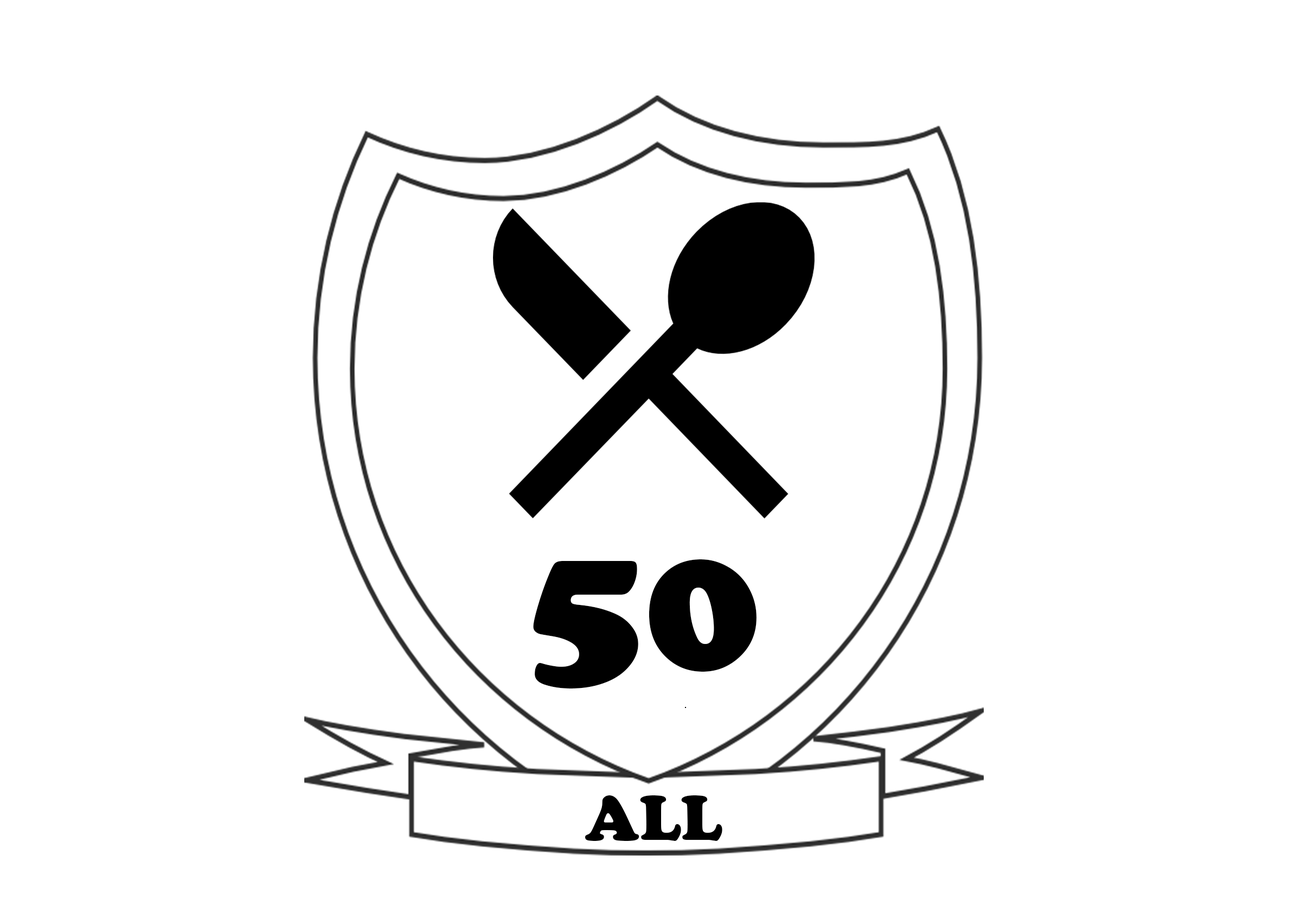
<style>
.page{position:relative;width:1307px;height:912px;background:#ffffff}
.page>*{position:absolute;margin:0}
.t1{font:195.3px "CooperBlack";color:#000000}
.t2{font:65.1px "CooperBlack";color:#000000}
</style>
<div class="page">
<p class="t1" style="left:533px;top:559px;width:224px;height:129px">50</p>
<p class="t2" style="left:585px;top:795px;width:138px;height:46px">ALL</p>
</div>
